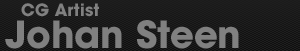
<style>
.page{position:relative;width:300px;height:51px;background:#1e1e1e}
.page>*{position:absolute;margin:0}
.t1{font:37.3px/31.3px "ITCAvantGardeStd-Bold";color:#808080}
.t2{font:16.9px/31.3px "ITCAvantGardeStd-Bold";color:#808080}
</style>
<div class="page">
<p class="t1" style="left:5px;top:3px;width:234px;height:46px"><span class="t2">   CG Artist<br></span>Johan Steen</p>
</div>
